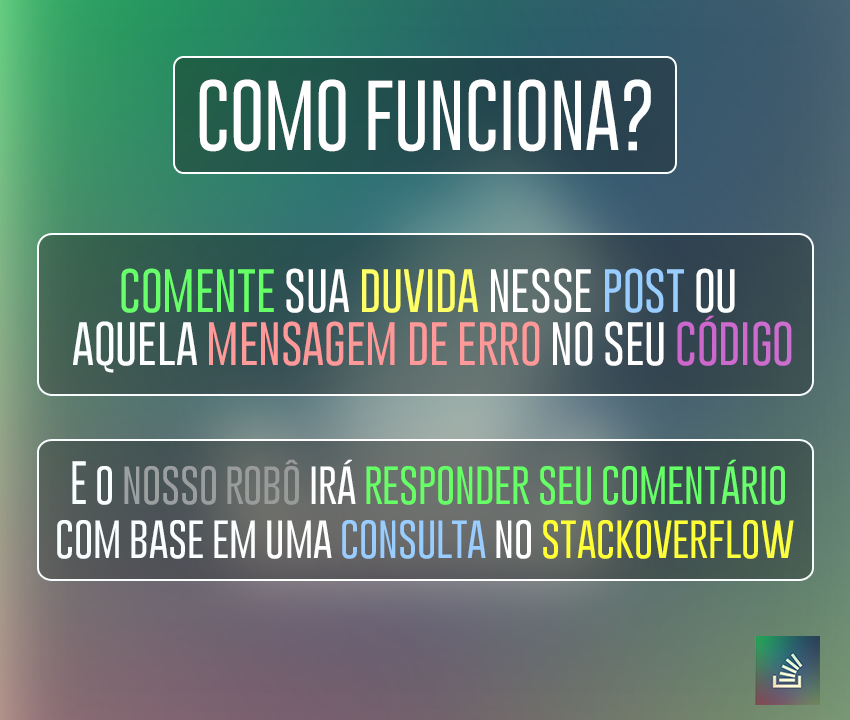
<style>
.page{position:relative;width:850px;height:720px}
.page>*{position:absolute;margin:0}
.t1{font:72.2px "GoboldThinLight";color:#ffffff}
.t2{font:44.5px "GoboldThinLight";color:#ff9999}
.t3{font:44.5px "GoboldThinLight";color:#66ff66}
.t4{font:44.5px "GoboldThinLight";color:#ffffff}
.t5{font:44.5px "GoboldThinLight";color:#ffff66}
.t6{font:44.5px "GoboldThinLight";color:#99ccff}
.t7{font:44.5px "GoboldThinLight";color:#cc66cc}
.t8{font:44.5px "GoboldThinLight";color:#66ff66;scale:0.9 1}
.t9{font:44.5px "GoboldThinLight";color:#ffffff;scale:0.9 1}
.t10{font:44.5px "GoboldThinLight";color:#999999;scale:0.9 1}
.t11{font:44.5px "GoboldThinLight";color:#99ccff;scale:0.9 1}
.t12{font:44.5px "GoboldThinLight";color:#ffff33;scale:0.9 1}
</style>
<div class="page">
<p class="t1" style="left:199px;top:79px;width:452px;height:73px">COMO FUNCIONA?</p>
<p class="t2" style="left:73px;top:268px;width:719px;height:105px;text-align:center"><span class="t3">COMENTE </span><span class="t4">SUA </span><span class="t5">DUVIDA </span><span class="t4">NESSE </span><span class="t6">POST </span><span class="t4">OU <br>AQUELA </span>MENSAGEM DE ERRO<span class="t4"> NO SEU </span><span class="t7">CÓDIGO</span></p>
<p class="t8" style="left:57px;top:459px;width:737px;height:100px;text-align:center"><span class="t9">E o </span><span class="t10">nosso robô</span><span class="t9"> irá </span>responder seu comentário<br><span class="t9">com base em uma </span><span class="t11">consulta </span><span class="t9">no </span><span class="t12">stackoverflow</span></p>
</div>
